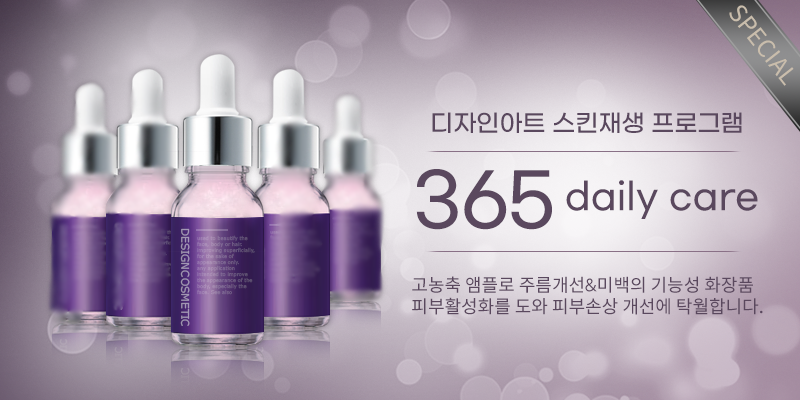
<style>
.page{position:relative;width:800px;height:400px}
.page>*{position:absolute;margin:0}
.t1{font:24px "SpoqaHanSans-Regular";color:#c9bdac}
.t2{font:24px "GmarketSansMedium";color:#5a485e}
.t3{font:72px "GmarketSansMedium";color:#5a485e}
.t4{font:36px "GmarketSansMedium";color:#5a485e}
.t5{font:18px "SpoqaHanSans-Regular";color:#5a485e}
</style>
<div class="page">
<p class="t1" style="left:729px;top:5px;width:65px;height:81px;rotate:52deg">SPECIAL</p>
<p class="t2" style="left:432px;top:112px;width:310px;height:21px">디자인아트 스킨재생 프로그램</p>
<p class="t3" style="left:416px;top:169px;width:136px;height:61px">365</p>
<p class="t4" style="left:566px;top:180px;width:192px;height:39px">daily care</p>
<p class="t5" style="left:412px;top:276px;width:351px;height:39px">고농축 앰플로 주름개선&amp;미백의 기능성 화장품<br>피부활성화를 도와 피부손상 개선에 탁월합니다.</p>
</div>
